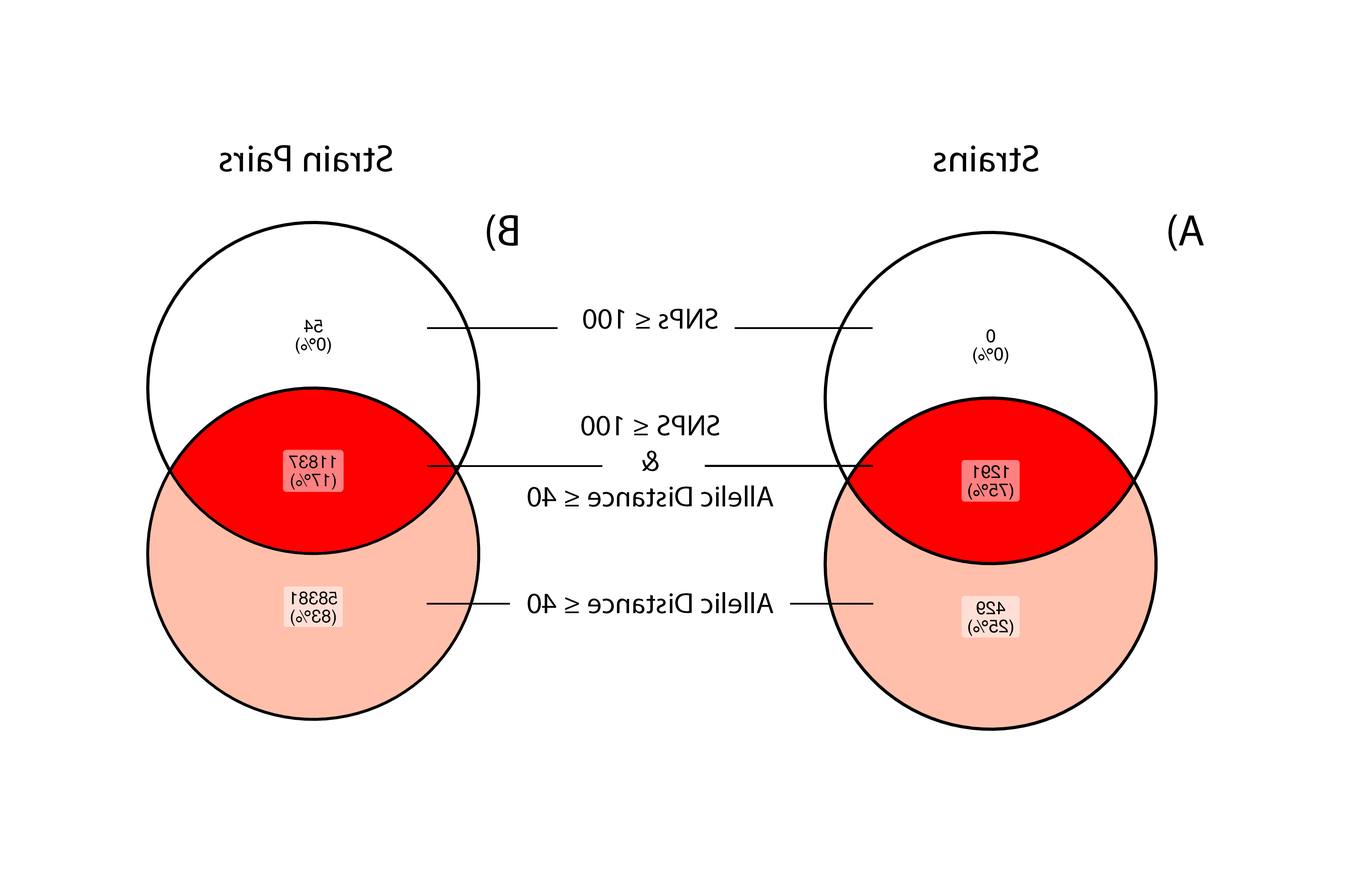
<style>
.page{position:relative;width:1353px;height:882px;background:#ffffff}
.page>*{position:absolute;margin:0}
.t1{font:38.5px "MyriadPro-Regular";color:#000000}
.t2{font:44.4px "MyriadPro-Regular";color:#000000}
.t3{font:29.6px "MyriadPro-Regular";color:#000000}
</style>
<div class="page">
<p class="t1" style="left:220px;top:145px;width:172px;height:27px;rotate:180deg">Strain Pairs</p>
<p class="t1" style="left:933px;top:145px;width:105px;height:27px;rotate:180deg">Strains</p>
<p class="t2" style="left:487px;top:214px;width:31px;height:37px;rotate:180deg">B)</p>
<p class="t2" style="left:1168px;top:214px;width:36px;height:37px">(A</p>
<p class="t3" style="left:528px;top:308px;width:245px;height:305px;text-align:center;rotate:180deg">SNPs ≤ 100<br><br><br>SNPS ≤ 100<br>&amp;<br>Allelic Distance ≤ 40<br><br><br>Allelic Distance ≤ 40</p>
</div>
